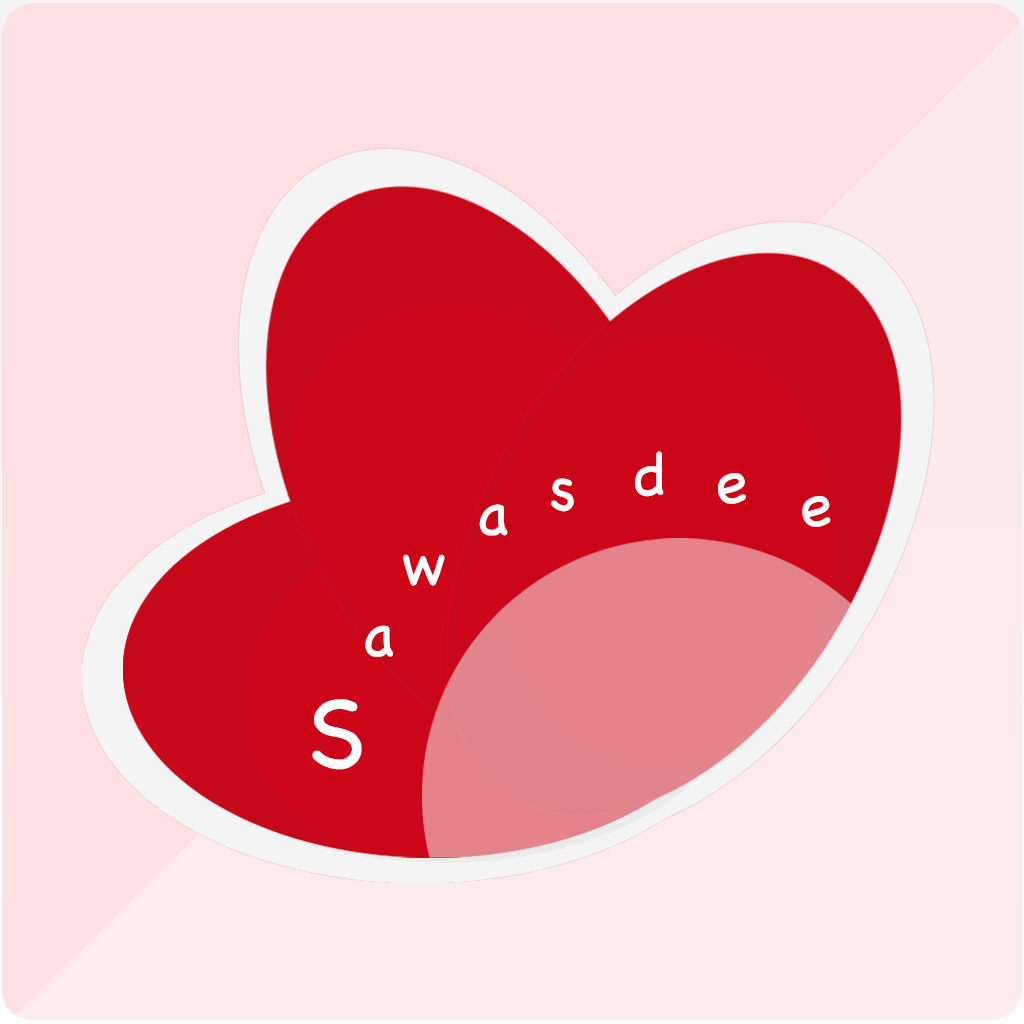
<style>
.page{position:relative;width:1024px;height:1024px;background:#fedfe2}
.page>*{position:absolute;margin:0}
.t1{font:61.4px "Chalkboard";color:#fefdfd}
.t2{font:102.3px "Chalkboard";color:#fefdfd}
</style>
<div class="page">
<p class="t1" style="left:635px;top:451px;width:29px;height:46px">d</p>
<p class="t1" style="left:718px;top:473px;width:28px;height:31px">e</p>
<p class="t1" style="left:551px;top:478px;width:23px;height:34px">s</p>
<p class="t1" style="left:802px;top:496px;width:29px;height:31px">e</p>
<p class="t1" style="left:479px;top:504px;width:29px;height:32px">a</p>
<p class="t1" style="left:403px;top:554px;width:42px;height:32px">w</p>
<p class="t1" style="left:365px;top:625px;width:28px;height:32px">a</p>
<p class="t2" style="left:312px;top:699px;width:50px;height:71px">S</p>
</div>
